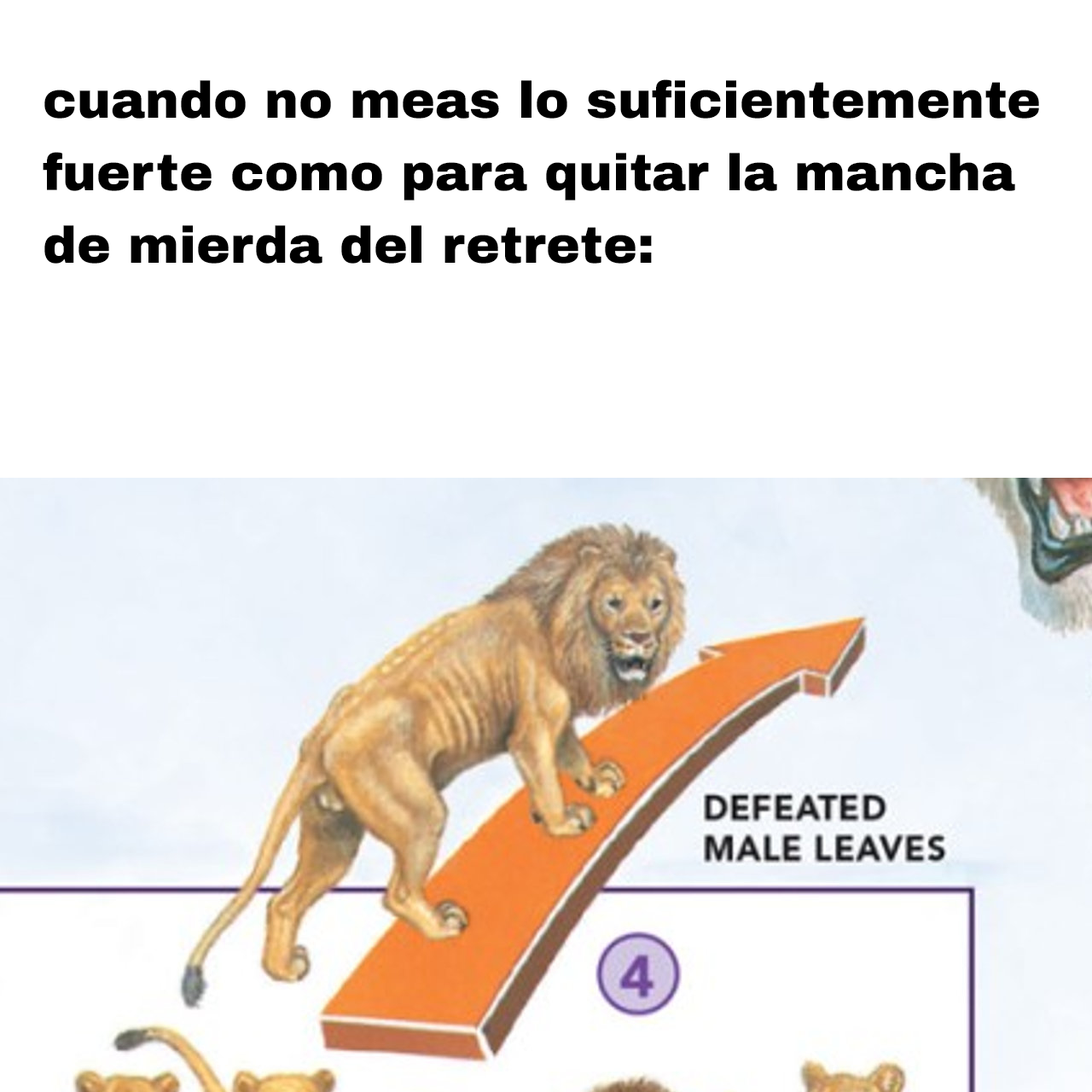
<style>
.page{position:relative;width:1092px;height:1092px;background:#ffffff}
.page>*{position:absolute;margin:0}
.t1{font:51.2px "ArchivoBlack-Regular";color:#000000}
</style>
<div class="page">
<p class="t1" style="left:43px;top:79px;width:996px;height:185px">cuando no meas lo suficientemente<br>fuerte como para quitar la mancha<br>de mierda del retrete:</p>
</div>
